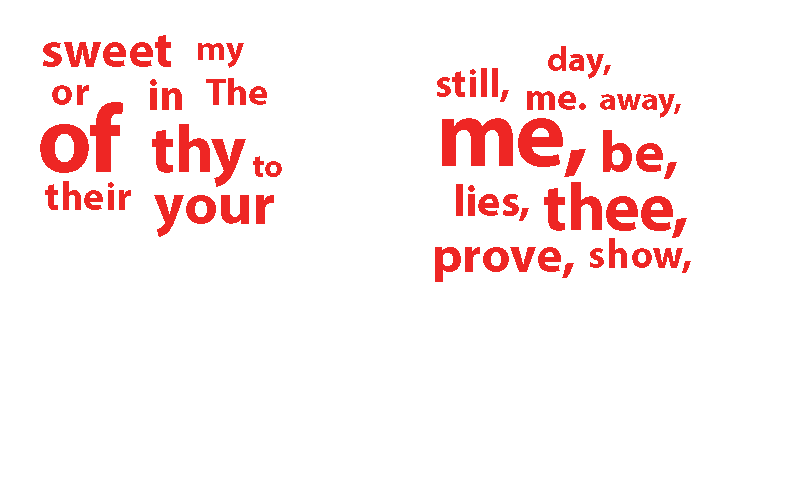
<style>
.page{position:relative;width:800px;height:500px;background:#ffffff}
.page>*{position:absolute;margin:0}
.t1{font:50.6px "MyriadPro-Bold";color:#ee2624}
.t2{font:35px "MyriadPro-Bold";color:#ee2624}
.t3{font:37.7px "MyriadPro-Bold";color:#ee2624}
.t4{font:40.5px "MyriadPro-Bold";color:#ee2624}
.t5{font:41.4px "MyriadPro-Bold";color:#ee2624}
.t6{font:44.2px "MyriadPro-Bold";color:#ee2624}
.t7{font:96.6px "MyriadPro-Bold";color:#ee2624}
.t8{font:33.1px "MyriadPro-Bold";color:#ee2624}
.t9{font:67.2px "MyriadPro-Bold";color:#ee2624}
.t10{font:58.9px "MyriadPro-Bold";color:#ee2624}
</style>
<div class="page">
<p class="t1" style="left:43px;top:35px;width:128px;height:32px">sweet</p>
<p class="t2" style="left:198px;top:43px;width:46px;height:25px">my</p>
<p class="t2" style="left:548px;top:46px;width:63px;height:33px">day,</p>
<p class="t3" style="left:206px;top:78px;width:61px;height:27px">The</p>
<p class="t4" style="left:437px;top:68px;width:72px;height:34px">still,</p>
<p class="t5" style="left:52px;top:85px;width:37px;height:20px">or</p>
<p class="t6" style="left:150px;top:79px;width:32px;height:31px">in</p>
<p class="t7" style="left:40px;top:102px;width:83px;height:71px">of</p>
<p class="t3" style="left:527px;top:91px;width:59px;height:19px">me.</p>
<p class="t8" style="left:600px;top:94px;width:81px;height:24px">away,</p>
<p class="t9" style="left:152px;top:124px;width:94px;height:63px">thy</p>
<p class="t7" style="left:442px;top:118px;width:144px;height:59px">me,</p>
<p class="t10" style="left:603px;top:130px;width:74px;height:49px">be,</p>
<p class="t8" style="left:253px;top:156px;width:29px;height:21px">to</p>
<p class="t4" style="left:45px;top:181px;width:86px;height:29px">their</p>
<p class="t6" style="left:456px;top:184px;width:73px;height:37px">lies,</p>
<p class="t9" style="left:544px;top:182px;width:143px;height:56px">thee,</p>
<p class="t10" style="left:154px;top:195px;width:120px;height:42px">your</p>
<p class="t5" style="left:590px;top:238px;width:101px;height:35px">show,</p>
<p class="t1" style="left:435px;top:247px;width:139px;height:35px">prove,</p>
</div>
